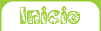
<style>
.page{position:relative;width:101px;height:31px;background:#ffffff}
.page>*{position:absolute;margin:0}
.t1{font:18px "SwirledBRK";color:#99cc33}
</style>
<div class="page">
<p class="t1" style="left:19px;top:6px;width:61px;height:18px">Inicio</p>
</div>
